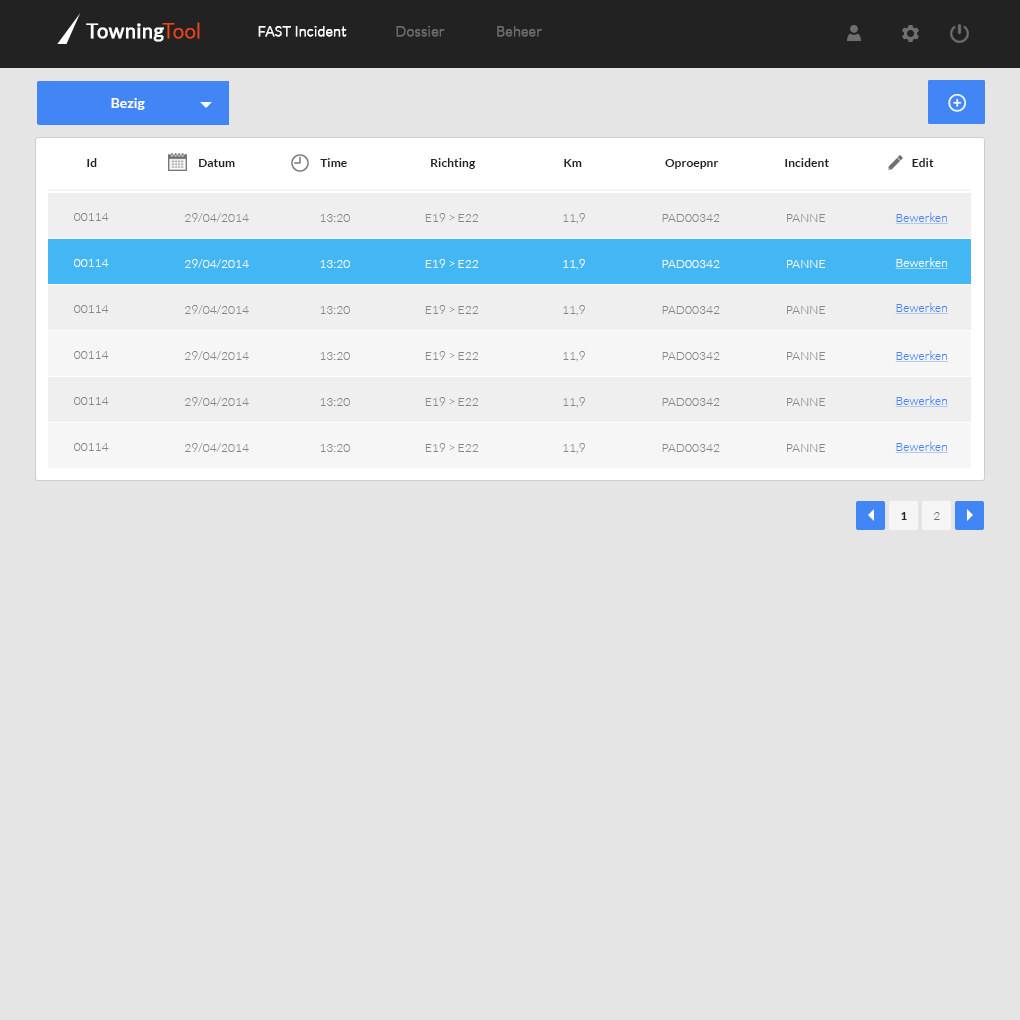
<style>
.page{position:relative;width:1020px;height:1020px;background:#e5e5e5}
.page>*{position:absolute;margin:0}
.t1{font:20.7px "Lato-Regular";letter-spacing:0.005em;color:#ffffff;font-weight:bold}
.t2{font:20.7px "Lato-Light";letter-spacing:0.005em;color:#e7461b;font-weight:bold}
.t3{font:14px "Lato-Light";letter-spacing:0.005em;color:#ffffff;font-weight:bold}
.t4{font:14px "Lato-Light";letter-spacing:0.005em;color:#6b6b6b;font-weight:bold}
.t5{font:14px "Lato-Bold";color:#ffffff}
.t6{font:12px "Lato-Bold";letter-spacing:0.005em;color:#222222}
.t7{font:12px "Lato-Light";color:#868685}
.t8{font:12px "Lato-Light";letter-spacing:0.005em;color:#868685}
.t9{font:12px "Lato-Light";letter-spacing:0.005em;color:#4285f4;text-decoration:underline}
.t10{font:12px "Lato-Light";letter-spacing:0.005em;color:#ffffff;text-decoration:underline}
.t11{font:12px "Lato-Light";color:#ffffff}
.t12{font:12px "Lato-Light";letter-spacing:0.005em;color:#ffffff}
.t13{font:12px "Lato-Light";letter-spacing:0.005em;color:#6f6f6f}
</style>
<div class="page">
<p class="t1" style="left:86px;top:22px;width:114px;height:20px">Towning<span class="t2">Tool</span></p>
<p class="t3" style="left:258px;top:26px;width:89px;height:11px">FAST Incident</p>
<p class="t4" style="left:396px;top:26px;width:49px;height:11px">Dossier</p>
<p class="t4" style="left:497px;top:26px;width:45px;height:11px">Beheer</p>
<p class="t5" style="left:111px;top:98px;width:34px;height:12px">Bezig</p>
<p class="t6" style="left:87px;top:158px;width:10px;height:9px">Id</p>
<p class="t6" style="left:199px;top:159px;width:36px;height:8px">Datum</p>
<p class="t6" style="left:320px;top:158px;width:27px;height:9px">Time</p>
<p class="t6" style="left:431px;top:158px;width:45px;height:11px">Richting</p>
<p class="t6" style="left:564px;top:159px;width:18px;height:8px">Km</p>
<p class="t6" style="left:665px;top:159px;width:54px;height:10px">Oproepnr</p>
<p class="t6" style="left:785px;top:158px;width:44px;height:9px">Incident</p>
<p class="t6" style="left:912px;top:158px;width:22px;height:9px">Edit</p>
<p class="t7" style="left:74px;top:213px;width:35px;height:8px">00114</p>
<p class="t8" style="left:184px;top:213px;width:65px;height:9px">29/04/2014</p>
<p class="t8" style="left:320px;top:214px;width:30px;height:8px">13:20</p>
<p class="t8" style="left:425px;top:213px;width:54px;height:9px">E19 &gt; E22</p>
<p class="t8" style="left:563px;top:213px;width:22px;height:11px">11,9</p>
<p class="t8" style="left:662px;top:214px;width:58px;height:8px">PAD00342</p>
<p class="t8" style="left:787px;top:214px;width:38px;height:8px">PANNE</p>
<p class="t9" style="left:895px;top:212px;width:53px;height:12px">Bewerken</p>
<p class="t10" style="left:895px;top:257px;width:53px;height:12px">Bewerken</p>
<p class="t11" style="left:74px;top:259px;width:35px;height:8px">00114</p>
<p class="t12" style="left:184px;top:259px;width:65px;height:9px">29/04/2014</p>
<p class="t12" style="left:320px;top:260px;width:30px;height:8px">13:20</p>
<p class="t12" style="left:425px;top:259px;width:54px;height:9px">E19 &gt; E22</p>
<p class="t12" style="left:563px;top:259px;width:22px;height:11px">11,9</p>
<p class="t12" style="left:662px;top:260px;width:58px;height:8px">PAD00342</p>
<p class="t12" style="left:787px;top:260px;width:38px;height:8px">PANNE</p>
<p class="t7" style="left:74px;top:305px;width:35px;height:8px">00114</p>
<p class="t8" style="left:184px;top:305px;width:65px;height:9px">29/04/2014</p>
<p class="t8" style="left:425px;top:305px;width:54px;height:9px">E19 &gt; E22</p>
<p class="t8" style="left:563px;top:305px;width:22px;height:11px">11,9</p>
<p class="t9" style="left:895px;top:302px;width:53px;height:12px">Bewerken</p>
<p class="t8" style="left:320px;top:306px;width:30px;height:8px">13:20</p>
<p class="t8" style="left:662px;top:306px;width:58px;height:8px">PAD00342</p>
<p class="t8" style="left:787px;top:306px;width:38px;height:8px">PANNE</p>
<p class="t7" style="left:74px;top:351px;width:35px;height:8px">00114</p>
<p class="t8" style="left:184px;top:351px;width:65px;height:9px">29/04/2014</p>
<p class="t8" style="left:320px;top:352px;width:30px;height:8px">13:20</p>
<p class="t8" style="left:425px;top:351px;width:54px;height:9px">E19 &gt; E22</p>
<p class="t8" style="left:563px;top:351px;width:22px;height:11px">11,9</p>
<p class="t8" style="left:662px;top:352px;width:58px;height:8px">PAD00342</p>
<p class="t8" style="left:787px;top:352px;width:38px;height:8px">PANNE</p>
<p class="t9" style="left:895px;top:350px;width:53px;height:12px">Bewerken</p>
<p class="t7" style="left:74px;top:397px;width:35px;height:8px">00114</p>
<p class="t8" style="left:184px;top:397px;width:65px;height:9px">29/04/2014</p>
<p class="t8" style="left:320px;top:398px;width:30px;height:8px">13:20</p>
<p class="t8" style="left:425px;top:397px;width:54px;height:9px">E19 &gt; E22</p>
<p class="t8" style="left:563px;top:397px;width:22px;height:11px">11,9</p>
<p class="t8" style="left:662px;top:398px;width:58px;height:8px">PAD00342</p>
<p class="t8" style="left:787px;top:398px;width:38px;height:8px">PANNE</p>
<p class="t9" style="left:895px;top:395px;width:53px;height:12px">Bewerken</p>
<p class="t7" style="left:74px;top:443px;width:35px;height:8px">00114</p>
<p class="t8" style="left:184px;top:443px;width:65px;height:9px">29/04/2014</p>
<p class="t8" style="left:320px;top:444px;width:30px;height:8px">13:20</p>
<p class="t8" style="left:425px;top:443px;width:54px;height:9px">E19 &gt; E22</p>
<p class="t8" style="left:563px;top:443px;width:22px;height:11px">11,9</p>
<p class="t8" style="left:662px;top:444px;width:58px;height:8px">PAD00342</p>
<p class="t8" style="left:787px;top:444px;width:38px;height:8px">PANNE</p>
<p class="t9" style="left:895px;top:441px;width:53px;height:12px">Bewerken</p>
<p class="t6" style="left:901px;top:512px;width:6px;height:8px">1</p>
<p class="t13" style="left:933px;top:512px;width:7px;height:8px">2</p>
</div>
